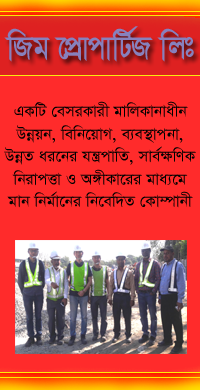
<style>
.page{position:relative;width:200px;height:390px;background:#ff2b2b}
.page>*{position:absolute;margin:0}
.t1{font:37.5px "ParashMJ";color:#8781bd;scale:0.88 1}
.t2{font:18.8px "SutonnyMJ";color:#020100}
</style>
<div class="page">
<p class="t1" style="left:4px;top:26px;width:190px;height:36px">wRg ‡cÖvcvwU©R wjt</p>
<p class="t2" style="left:4px;top:101px;width:192px;height:107px;text-align:center">GKwU †emiKvix gvwjKvbvaxb<br>Dbœqb, wewb‡qvM, e¨e¯’vcbv,<br>DbœZ ai‡bi hš¿cvwZ, mve©ÿwYK<br>wbivcËv I A½xKv‡ii gva¨‡g<br>gvb wbg©v‡bi wb‡ew`Z †Kv¤úvbx</p>
</div>
